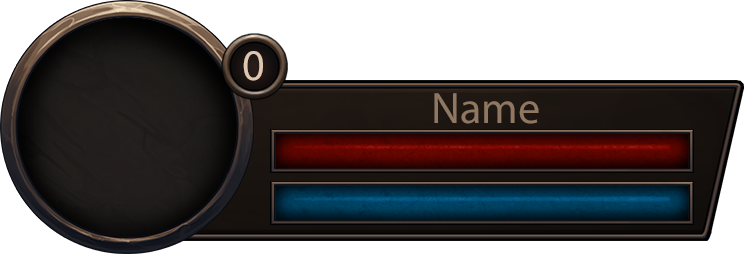
<style>
.page{position:relative;width:744px;height:254px;background:#ffffff}
.page>*{position:absolute;margin:0}
.t1{font:44px "MyriadPro-Regular";color:#dfc6b1}
.t2{font:44px "MyriadPro-Regular";color:#907762}
</style>
<div class="page">
<p class="t1" style="left:243px;top:51px;width:20px;height:30px">0</p>
<p class="t2" style="left:434px;top:93px;width:105px;height:31px">Name</p>
</div>
